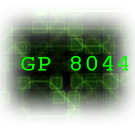
<style>
.page{position:relative;width:135px;height:135px}
.page>*{position:absolute;margin:0}
.t1{font:23px "CourierNewPSMT";color:#00ff00;font-weight:bold;scale:1.1 1}
</style>
<div class="page">
<p class="t1" style="left:21px;top:56px;width:108px;height:15px">GP 8044</p>
</div>
